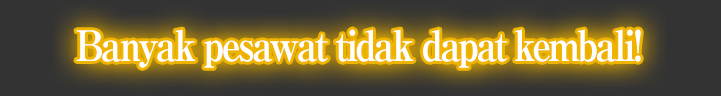
<style>
.page{position:relative;width:721px;height:96px;background:#333333}
.page>*{position:absolute;margin:0}
.t1{font:42px "RyuminPro-ExBold";letter-spacing:-0.08em;color:#ffffff;scale:0.9 1}
</style>
<div class="page">
<p class="t1" style="left:76px;top:29px;width:565px;height:39px">Banyak pesawat tidak dapat kembali!</p>
</div>
